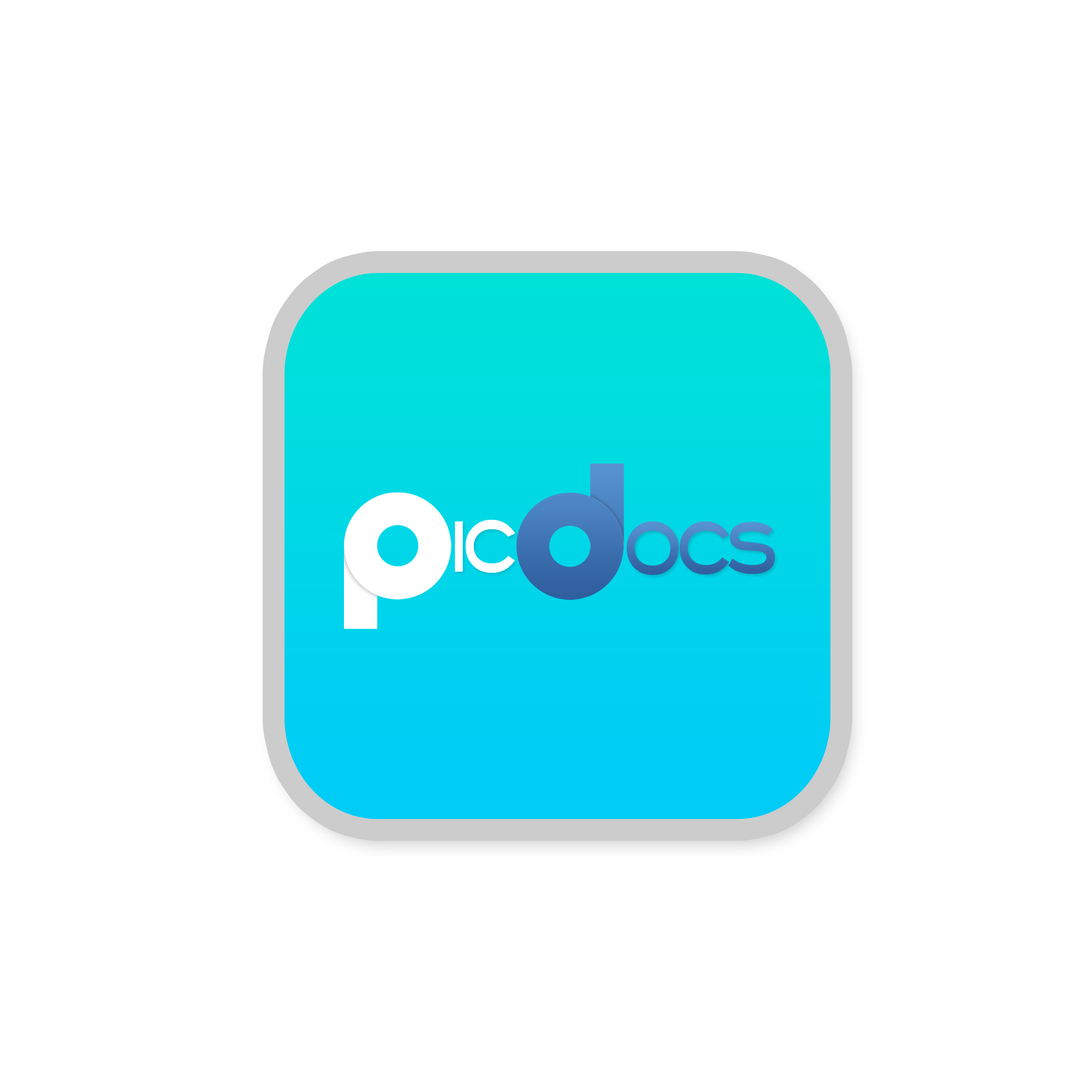
<style>
.page{position:relative;width:1092px;height:1092px;background:#ffffff}
.page>*{position:absolute;margin:0}
.t1{font:81.9px "BlairMdITCTTMedium";letter-spacing:-0.12em;color:#ffffff;scale:0.78 1}
.t2{font:81.9px "BlairMdITCTTMedium";letter-spacing:-0.12em;scale:0.78 1}
</style>
<div class="page">
<p class="t1" style="left:455px;top:520px;width:60px;height:53px">ic</p>
<p class="t2" style="left:626px;top:521px;width:149px;height:54px">ocs</p>
</div>
